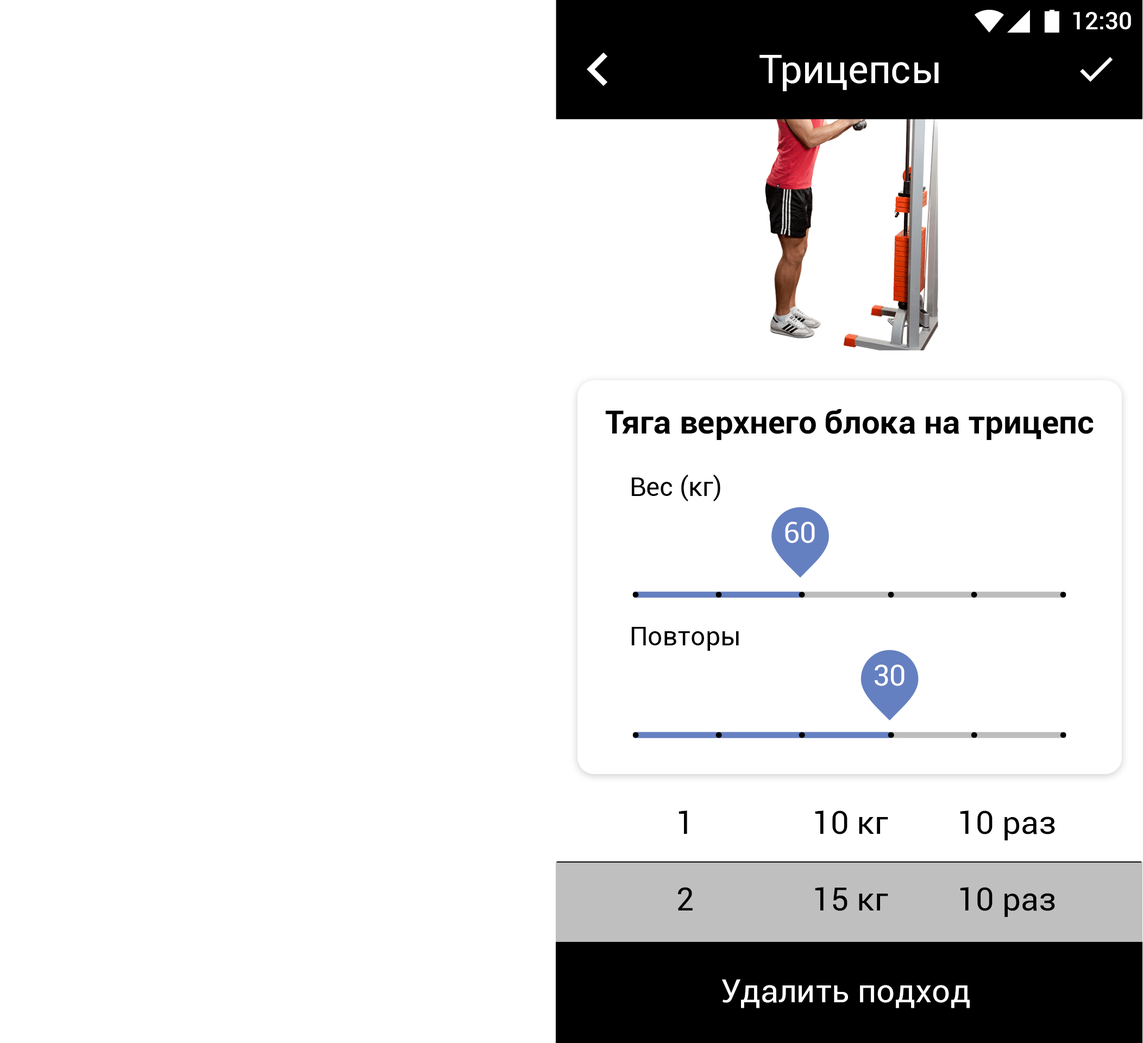
<style>
.page{position:relative;width:1143px;height:1043px;background:#ffffff}
.page>*{position:absolute;margin:0}
.t1{font:23.9px "Roboto-Medium";color:#ffffff}
.t2{font:39.1px "Roboto-Regular";color:#ffffff}
.t3{font:32.6px "Roboto-Bold";color:#000000}
.t4{font:26.1px "Roboto-Regular";color:#000000}
.t5{font:29.1px "Roboto-Regular";color:#ffffff}
.t6{font:32.7px "Roboto-Regular";color:#000000}
.t7{font:32.6px "Roboto-Regular";color:#ffffff}
</style>
<div class="page">
<p class="t1" style="left:1073px;top:12px;width:58px;height:17px">12:30</p>
<p class="t2" style="left:760px;top:55px;width:179px;height:36px">Трицепсы</p>
<p class="t3" style="left:605px;top:409px;width:489px;height:31px">Тяга верхнего блока на трицепc</p>
<p class="t4" style="left:632px;top:474px;width:88px;height:27px">Вес (кг)</p>
<p class="t5" style="left:785px;top:522px;width:30px;height:21px">60</p>
<p class="t4" style="left:631px;top:627px;width:108px;height:24px">Повторы</p>
<p class="t5" style="left:875px;top:664px;width:30px;height:22px">30</p>
<p class="t6" style="left:679px;top:811px;width:8px;height:23px">1</p>
<p class="t6" style="left:815px;top:811px;width:73px;height:24px">10 кг</p>
<p class="t6" style="left:960px;top:811px;width:95px;height:29px">10 раз</p>
<p class="t6" style="left:678px;top:887px;width:15px;height:24px">2</p>
<p class="t6" style="left:815px;top:887px;width:73px;height:24px">15 кг</p>
<p class="t6" style="left:960px;top:887px;width:95px;height:30px">10 раз</p>
<p class="t7" style="left:722px;top:980px;width:248px;height:28px">Удалить подход</p>
</div>
